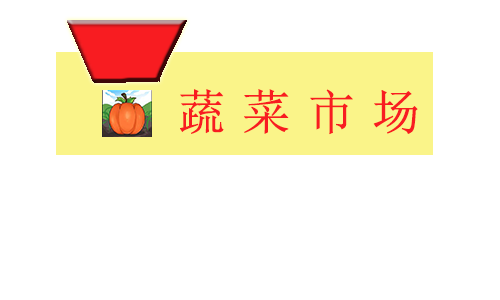
<style>
.page{position:relative;width:500px;height:300px;background:#ffffff}
.page>*{position:absolute;margin:0}
.t1{font:48px "SimSun";letter-spacing:-0.1em;color:#f81c21;font-weight:bold}
</style>
<div class="page">
<p class="t1" style="left:180px;top:89px;width:238px;height:46px">蔬 菜 市 场</p>
</div>
